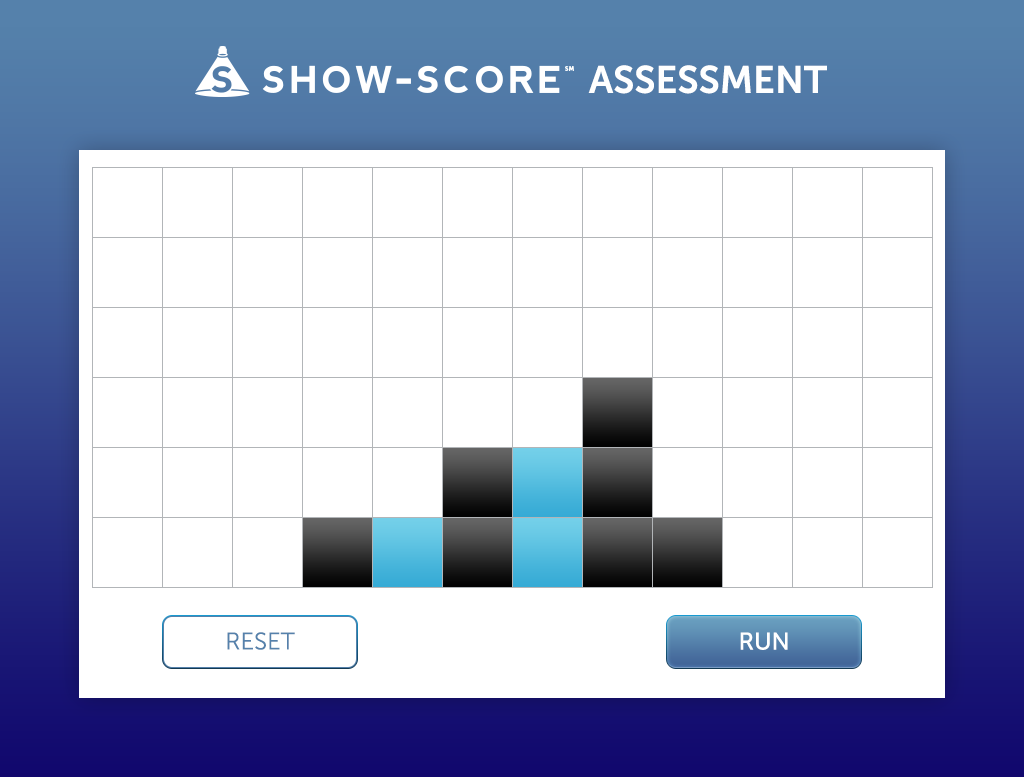
<style>
.page{position:relative;width:1024px;height:777px;background:#ffffff}
.page>*{position:absolute;margin:0}
.t1{font:38px "MuseoSans-700";color:#ffffff;text-transform:uppercase}
.t2{font:24px "MuseoSans-300";color:#5581ab;text-transform:uppercase}
.t3{font:24px "MuseoSans-500";color:#ffffff;text-transform:uppercase}
</style>
<div class="page">
<p class="t1" style="left:588px;top:65px;width:239px;height:29px">Assessment</p>
<p class="t2" style="left:227px;top:632px;width:68px;height:18px">Reset</p>
<p class="t3" style="left:740px;top:632px;width:48px;height:18px">RUN</p>
</div>
